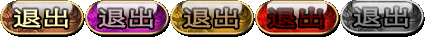
<style>
.page{position:relative;width:425px;height:37px}
.page>*{position:absolute;margin:0}
.t1{font:20.8px "STXihei";color:#fff7b3;font-weight:bold;scale:1.38 1}
.t2{font:20.8px "STXihei";color:#c7a0ae;font-weight:bold;scale:1.38 1}
.t3{font:20.8px "STXihei";color:#bd9267;font-weight:bold;scale:1.38 1}
.t4{font:20.8px "STXihei";color:#868585;font-weight:bold;scale:1.38 1}
</style>
<div class="page">
<p class="t1" style="left:13px;top:8px;width:56px;height:20px">退出</p>
<p class="t2" style="left:98px;top:8px;width:56px;height:20px">退出</p>
<p class="t3" style="left:183px;top:8px;width:56px;height:20px">退出</p>
<p class="t4" style="left:353px;top:7px;width:56px;height:20px">退出</p>
</div>
